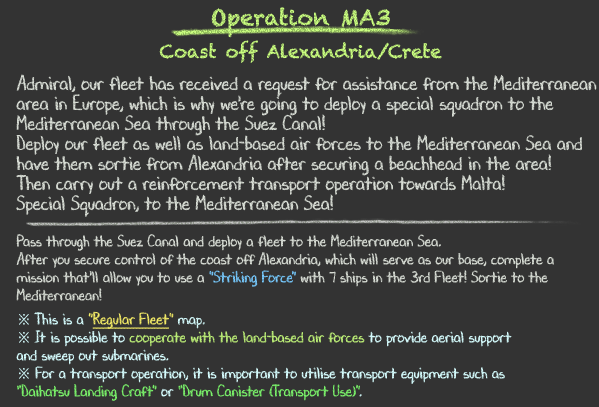
<style>
.page{position:relative;width:599px;height:407px;background:#333333}
.page>*{position:absolute;margin:0}
.t1{font:18px/36px "Chalkduster"}
.t2{font:22px/36px "Chalkduster"}
.t3{font:20px/20px "DJBChalkItUp";color:#d9ded6;scale:0.9 1}
.t4{font:16px/18px "DJBChalkItUp";color:#d9ded6;scale:0.9 1}
.t5{font:16px/18px "DJBChalkItUp";color:#78cbff;scale:0.9 1}
.t6{font:16px/24px "DJBChalkItUp";color:#d9ded6;scale:0.9 1}
.t7{font:16px/18px "TimesNewRomanPSMT";color:#d7feff;scale:0.9 1}
.t8{font:16px/18px "DJBChalkItUp";color:#d7feff;scale:0.9 1}
.t9{font:16px/18px "DJBChalkItUp";color:#f5ed68;scale:0.9 1}
.t10{font:16px/18px "DJBChalkItUp";color:#f5ed68;text-decoration:underline;scale:0.9 1}
.t11{font:16px/18px "DJBChalkItUp";color:#bdef78;scale:0.9 1}
.t12{font:16px/18px "DJBChalkItUp";color:#7bf26b;scale:0.9 1}
</style>
<div class="page">
<p class="t1" style="left:159px;top:7px;width:283px;height:56px;text-align:center"><span class="t2">Operation MA3<br></span>Coast off Alexandria/Crete</p>
<p class="t3" style="left:16px;top:74px;width:581px;height:327px">Admiral, our fleet has received a request for assistance from the Mediterranean<br>area in Europe, which is why we're going to deploy a special squadron to the<br>Mediterranean Sea through the Suez Canal!<br>Deploy our fleet as well as land-based air forces to the Mediterranean Sea and<br>have them sortie from Alexandria after securing a beachhead in the area!<br>Then carry out a reinforcement transport operation towards Malta!<br>Special Squadron, to the Mediterranean Sea!<br><br><span class="t4">Pass through the Suez Canal and deploy a fleet to the Mediterranean Sea.<br>After you secure control of the coast off Alexandria, which will serve as our base, complete a<br>mission that'll allow you to use a </span><span class="t5">"Striking Force"</span><span class="t4"> with 7 ships in the 3rd Fleet! Sortie to the<br></span><span class="t6">Mediterranean!<br></span><span class="t7">※ </span><span class="t8">This is a </span><span class="t9">"</span><span class="t10">Regular Fleet</span><span class="t9">"</span><span class="t8"> map.<br></span><span class="t7">※ </span><span class="t8">It is possible to </span><span class="t11">cooperate with the land-based air forces </span><span class="t8">to provide aerial support<br>and sweep out submarines.<br></span><span class="t7">※</span><span class="t8"> For a transport operation, it is important to utilise transport equipment such as<br></span><span class="t12">“Daihatsu Landing Craft”</span><span class="t8"> or </span><span class="t12">“Drum Canister (Transport Use)”</span><span class="t8">.</span></p>
</div>
